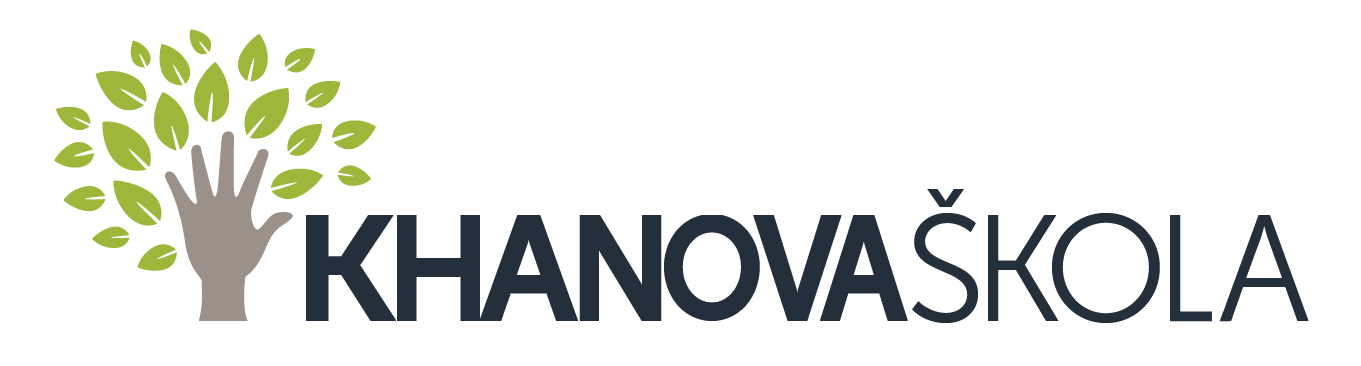
<style>
.page{position:relative;width:1361px;height:366px;background:#ffffff}
.page>*{position:absolute;margin:0}
.t1{font:151.3px "MuseoSans-300";letter-spacing:-0.08em;color:#242f3c}
.t2{font:151.3px "MuseoSans-300";letter-spacing:-0.12em;color:#242f3c}
.t3{font:151.3px "MuseoSans-300";letter-spacing:-0.1em;color:#242f3c}
.t4{font:151.3px "MuseoSans-500";letter-spacing:-0.06em;color:#242f3c;scale:1.1 1}
.t5{font:151.3px "MuseoSans-500";letter-spacing:-0.06em;color:#242f3c;scale:0.9 1}
.t6{font:151.3px "MuseoSans-500";letter-spacing:-0.04em;color:#242f3c}
.t7{font:151.3px "MuseoSans-500";letter-spacing:-0.08em;color:#242f3c;scale:0.88 1}
.t8{font:137.5px "MuseoSans-500";letter-spacing:-0.06em;color:#242f3c;scale:0.9 1}
.t9{font:151.3px "MuseoSans-500";letter-spacing:-0.1em;color:#242f3c;scale:0.88 1}
</style>
<div class="page">
<p class="t1" style="left:912px;top:189px;width:397px;height:134px">Š<span class="t2">K</span>O<span class="t3">L</span>A</p>
<p class="t4" style="left:309px;top:214px;width:596px;height:107px">K<span class="t5">H</span><span class="t6">A</span><span class="t7">N</span><span class="t8">O</span><span class="t9">V</span><span class="t7">A</span></p>
</div>
